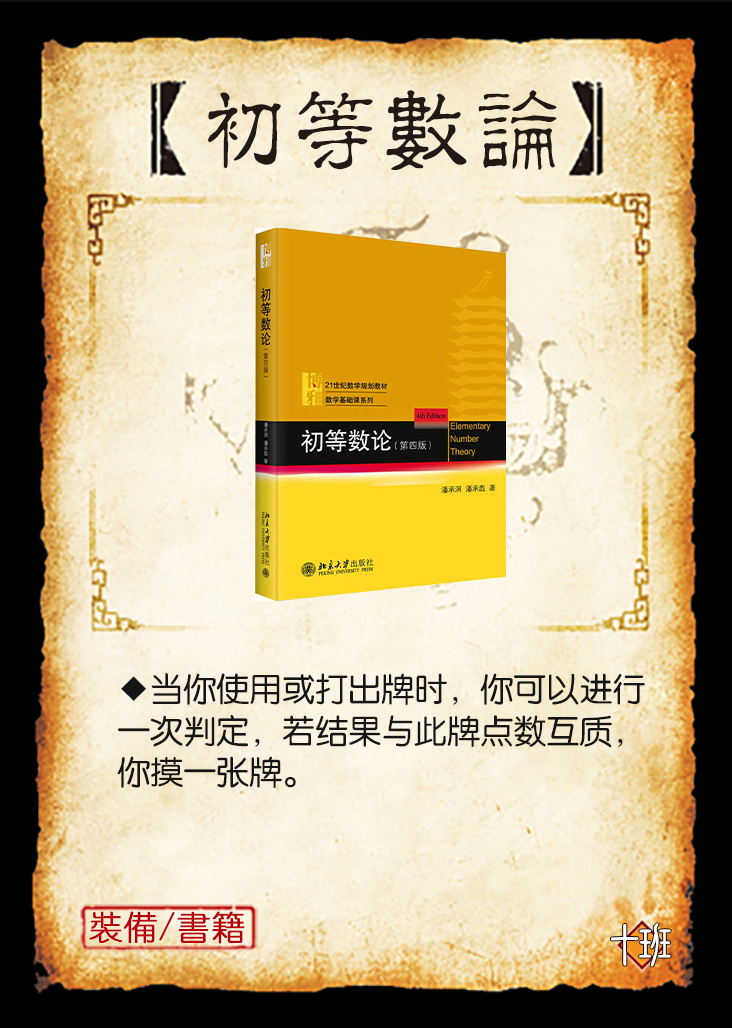
<style>
.page{position:relative;width:732px;height:1028px}
.page>*{position:absolute;margin:0}
.t1{font:95.8px "JMFLS_GBK";color:#221815;scale:0.95 1}
.t2{font:33.3px/41.7px "FZY3JW--GB1-0";letter-spacing:-0.01em;color:#151515}
.t3{font:33.3px "YouYuan";color:#ba0007;font-weight:bold}
.t4{font:50px "DFNewChuan-W5-WINP-BF";letter-spacing:-0.4em;color:#ffffff}
</style>
<div class="page">
<p class="t1" style="left:208px;top:90px;width:349px;height:81px">初等數論</p>
<p class="t2" style="left:117px;top:673px;width:528px;height:115px">◆当你使用或打出牌时，你可以进行<br>一次判定，若结果与此牌点数互质，<br>你摸一张牌。</p>
<p class="t3" style="left:89px;top:911px;width:156px;height:33px">裝備/書籍</p>
<p class="t4" style="left:611px;top:923px;width:60px;height:44px">十班</p>
</div>
